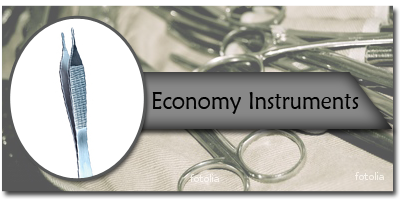
<style>
.page{position:relative;width:400px;height:200px}
.page>*{position:absolute;margin:0}
.t1{font:24px "MaiandraGD-Regular";color:#000000;scale:0.92 1}
</style>
<div class="page">
<p class="t1" style="left:152px;top:92px;width:207px;height:22px">Economy Instruments</p>
</div>
